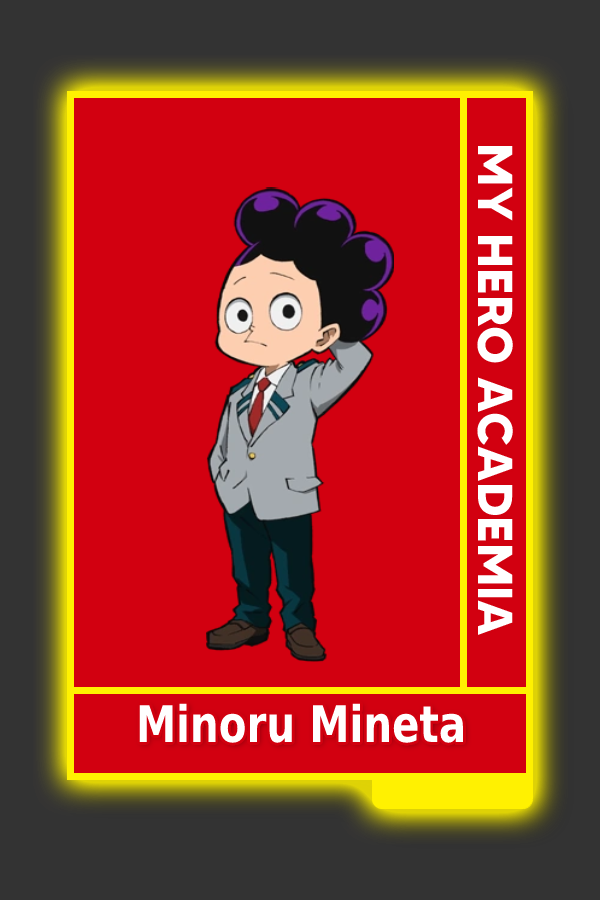
<style>
.page{position:relative;width:600px;height:900px;background:#d20010}
.page>*{position:absolute;margin:0}
.t1{font:48.8px "MADETOMMY-Bold";color:#ffffff}
.t2{font:50.5px "MADETOMMY-Bold";color:#ffffff;scale:0.8 1}
</style>
<div class="page">
<p class="t1" style="left:477px;top:146px;width:36px;height:489px;rotate:90deg">MY HERO ACADEMIA</p>
<p class="t2" style="left:139px;top:703px;width:324px;height:40px">Minoru Mineta</p>
</div>
